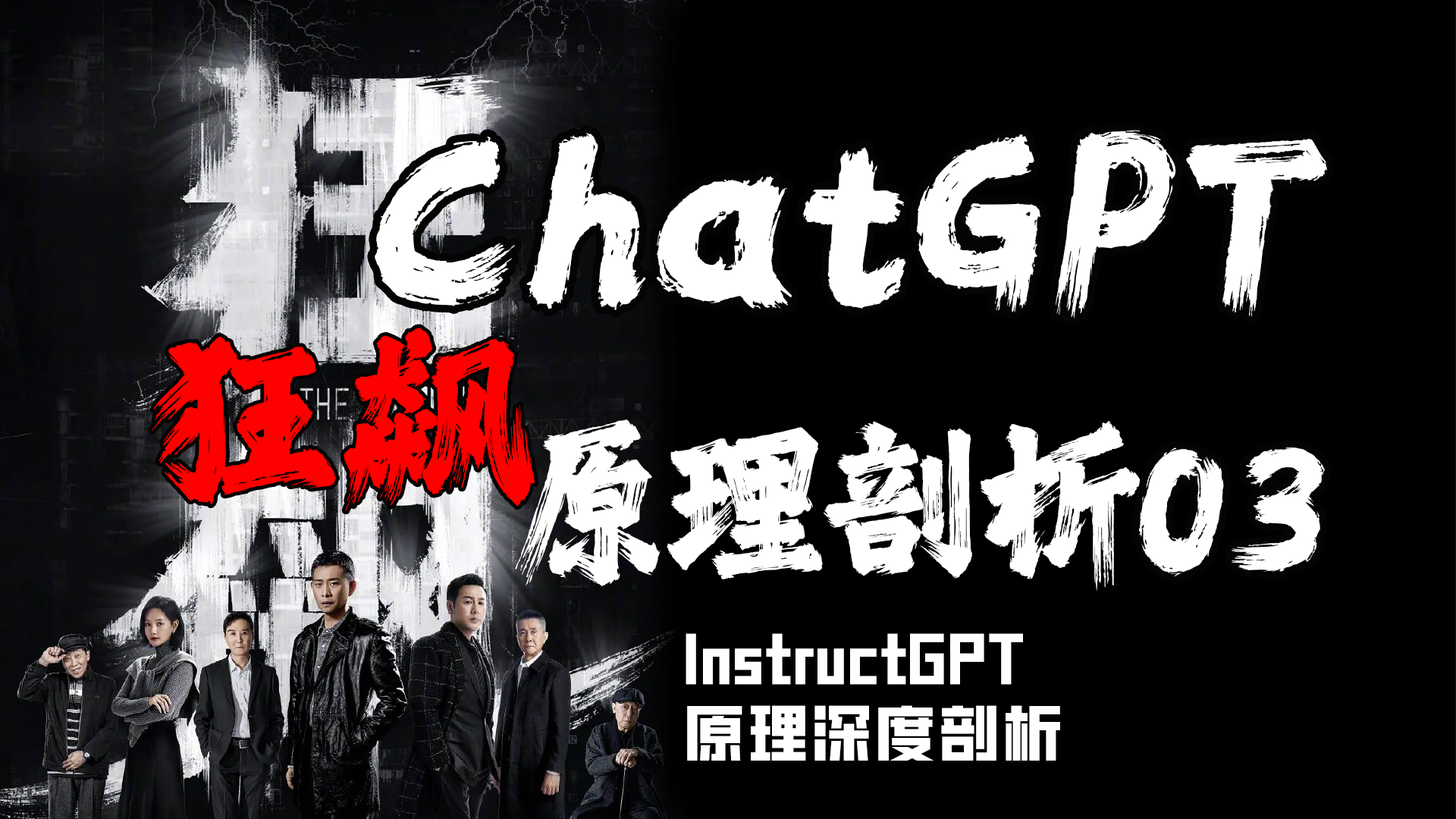
<style>
.page{position:relative;width:1456px;height:819px;background:#000000}
.page>*{position:absolute;margin:0}
.t1{font:219.9px "REEJI-CHAO-BeiMingGBT-Flash";letter-spacing:-0.05em;color:#ffffff}
.t2{font:189.6px "REEJI-CHAO-BeiMingGBT-Flash";letter-spacing:0.05em;color:#ff0000}
.t3{font:166.8px "REEJI-CHAO-BeiMingGBT-Flash";letter-spacing:-0.05em;color:#ffffff}
.t4{font:60.7px/75.8px "HGGTZHVF-Medium";letter-spacing:0.05em;color:#ffffff}
</style>
<div class="page">
<p class="t1" style="left:375px;top:130px;width:953px;height:188px">ChatGPT</p>
<p class="t2" style="left:152px;top:328px;width:383px;height:183px">狂飙</p>
<p class="t3" style="left:515px;top:419px;width:628px;height:172px">原理剖析</p>
<p class="t3" style="left:1139px;top:447px;width:186px;height:129px">03</p>
<p class="t4" style="left:686px;top:633px;width:374px;height:128px">InstructGPT<br>原理深度剖析</p>
</div>
